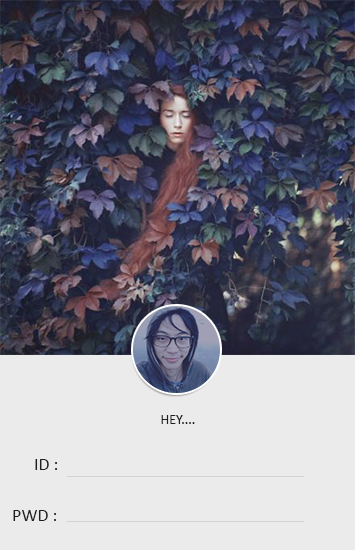
<style>
.page{position:relative;width:355px;height:550px;background:#ebebeb}
.page>*{position:absolute;margin:0}
.t1{font:14px "Calibri";color:#201f22}
.t2{font:18px "Calibri";color:#201f22}
</style>
<div class="page">
<p class="t1" style="left:161px;top:415px;width:34px;height:9px">HEY....</p>
<p class="t2" style="left:35px;top:459px;width:22px;height:11px">ID :</p>
<p class="t2" style="left:13px;top:510px;width:43px;height:11px">PWD :</p>
</div>
